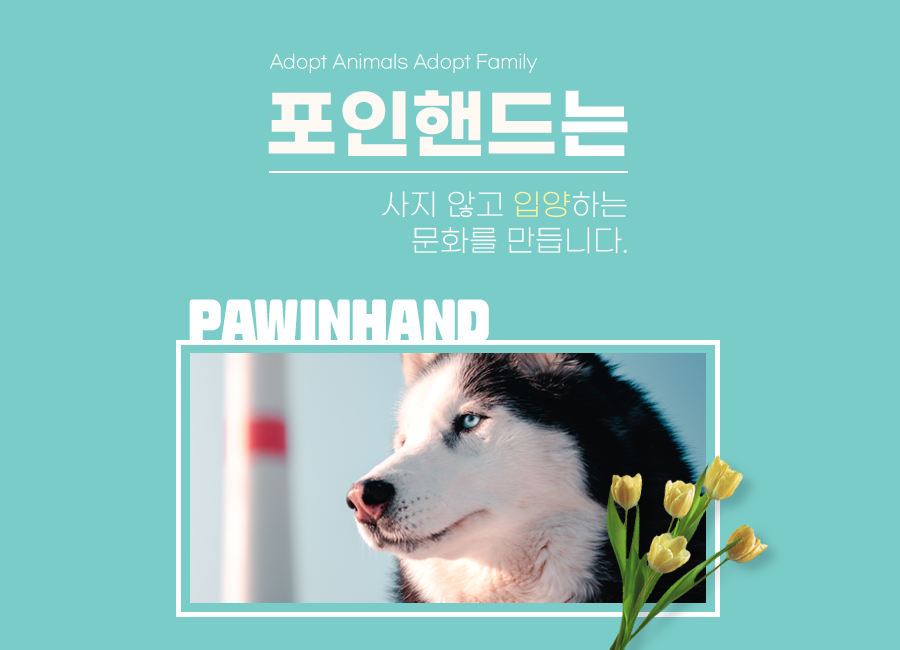
<style>
.page{position:relative;width:900px;height:650px;background:#7accc8}
.page>*{position:absolute;margin:0}
.t1{font:17.9px "GmarketSansTTFLight";color:#ffffff}
.t2{font:75.8px "GmarketSansTTFBold";color:#fff9f3}
.t3{font:75.8px "GmarketSansTTFBold";color:#ffffff}
.t4{font:30px "GmarketSansTTFLight";color:#ffffff}
.t5{font:30px "GmarketSansTTFLight";color:#fff799}
.t6{font:48px "RixInooAriDuriR";color:#ffffff}
</style>
<div class="page">
<p class="t1" style="left:270px;top:53px;width:267px;height:20px">Adopt Animals Adopt Family</p>
<p class="t2" style="left:268px;top:90px;width:360px;height:66px">포인핸드<span class="t3">는</span></p>
<p class="t4" style="left:382px;top:191px;width:245px;height:63px;text-align:right">사지 않고 <span class="t5">입양</span>하는<br>문화를 만듭니다.</p>
<p class="t6" style="left:189px;top:299px;width:300px;height:44px">PAWINHAND</p>
</div>
